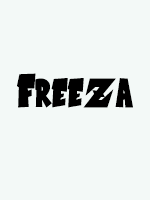
<style>
.page{position:relative;width:150px;height:200px;background:#f3f9f7}
.page>*{position:absolute;margin:0}
.t1{font:48px "SaiyanSans";color:#000000}
</style>
<div class="page">
<p class="t1" style="left:17px;top:73px;width:116px;height:35px">Freeza</p>
</div>
